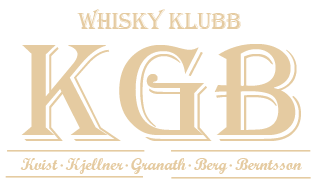
<style>
.page{position:relative;width:317px;height:184px;background:#ffffff}
.page>*{position:absolute;margin:0}
.t1{font:23.8px "Algerian";letter-spacing:-0.01em;color:#e6cca1}
.t2{font:143.8px "Algerian";color:#e6cca1}
.t3{font:16.7px "ScriptMTBold";color:#e6cca1}
</style>
<div class="page">
<p class="t1" style="left:77px;top:9px;width:164px;height:20px">Whisky Klubb</p>
<p class="t2" style="left:21px;top:44px;width:280px;height:97px">KGB</p>
<p class="t3" style="left:20px;top:158px;width:282px;height:16px">Kvist  Kjellner  Granath  Berg  Berntsson</p>
</div>
